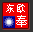
<style>
.page{position:relative;width:33px;height:32px;background:#f20000}
.page>*{position:absolute;margin:0}
.t1{font:10.4px "SimSun";color:#ffffff}
.t2{font:11.7px "SimSun";color:#ffffff}
</style>
<div class="page">
<p class="t1" style="left:6px;top:4px;width:19px;height:9px">东欧</p>
<p class="t2" style="left:16px;top:15px;width:11px;height:12px">奉</p>
</div>
